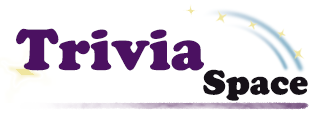
<style>
.page{position:relative;width:315px;height:116px;background:#ffffff}
.page>*{position:absolute;margin:0}
.t1{font:60px "CooperBlack";color:#4b1161}
.t2{font:36px "CooperBlack";color:#161118}
</style>
<div class="page">
<p class="t1" style="left:16px;top:28px;width:188px;height:43px">Trivia</p>
<p class="t2" style="left:203px;top:69px;width:105px;height:32px">Space</p>
</div>
